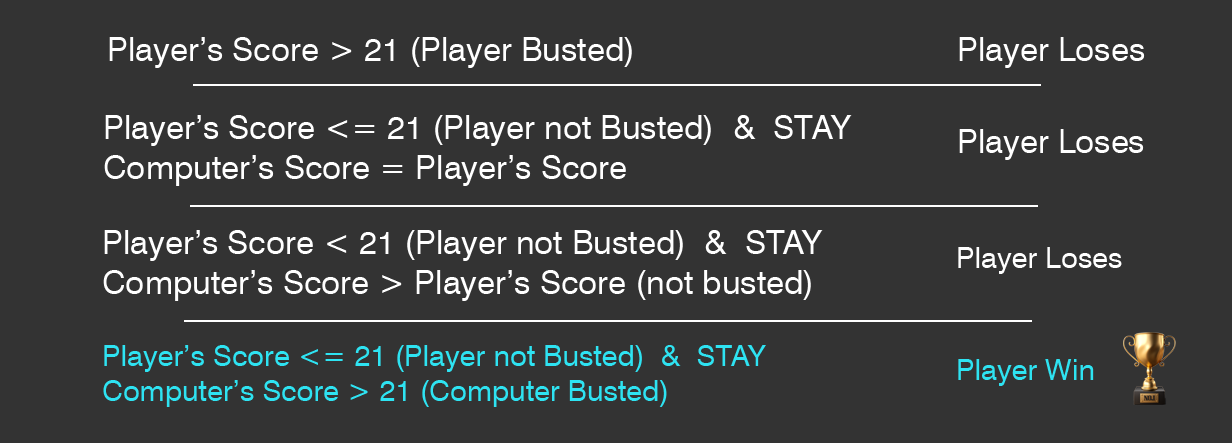
<style>
.page{position:relative;width:1232px;height:443px;background:#333333}
.page>*{position:absolute;margin:0}
.t1{font:32.9px "Swiss721BT-Roman";color:#ffffff}
.t2{font:29.2px "Swiss721BT-Roman";color:#ffffff}
.t3{font:29.2px "Swiss721BT-Roman";color:#2ee3f2}
</style>
<div class="page">
<p class="t1" style="left:109px;top:37px;width:523px;height:31px">Player’s Score &gt; 21 (Player Busted)</p>
<p class="t1" style="left:959px;top:37px;width:186px;height:31px">Player Loses</p>
<p class="t1" style="left:104px;top:115px;width:748px;height:71px">Player’s Score &lt;= 21 (Player not Busted)  &amp;  STAY<br>Computer’s Score = Player’s Score</p>
<p class="t1" style="left:959px;top:129px;width:185px;height:31px">Player Loses</p>
<p class="t1" style="left:103px;top:230px;width:720px;height:71px">Player’s Score &lt; 21 (Player not Busted)  &amp;  STAY<br>Computer’s Score &gt; Player’s Score (not busted)</p>
<p class="t2" style="left:958px;top:247px;width:164px;height:27px">Player Loses</p>
<p class="t3" style="left:103px;top:345px;width:663px;height:62px">Player’s Score &lt;= 21 (Player not Busted)  &amp;  STAY<br>Computer’s Score &gt; 21 (Computer Busted)</p>
<p class="t3" style="left:958px;top:359px;width:136px;height:27px">Player Win</p>
</div>
